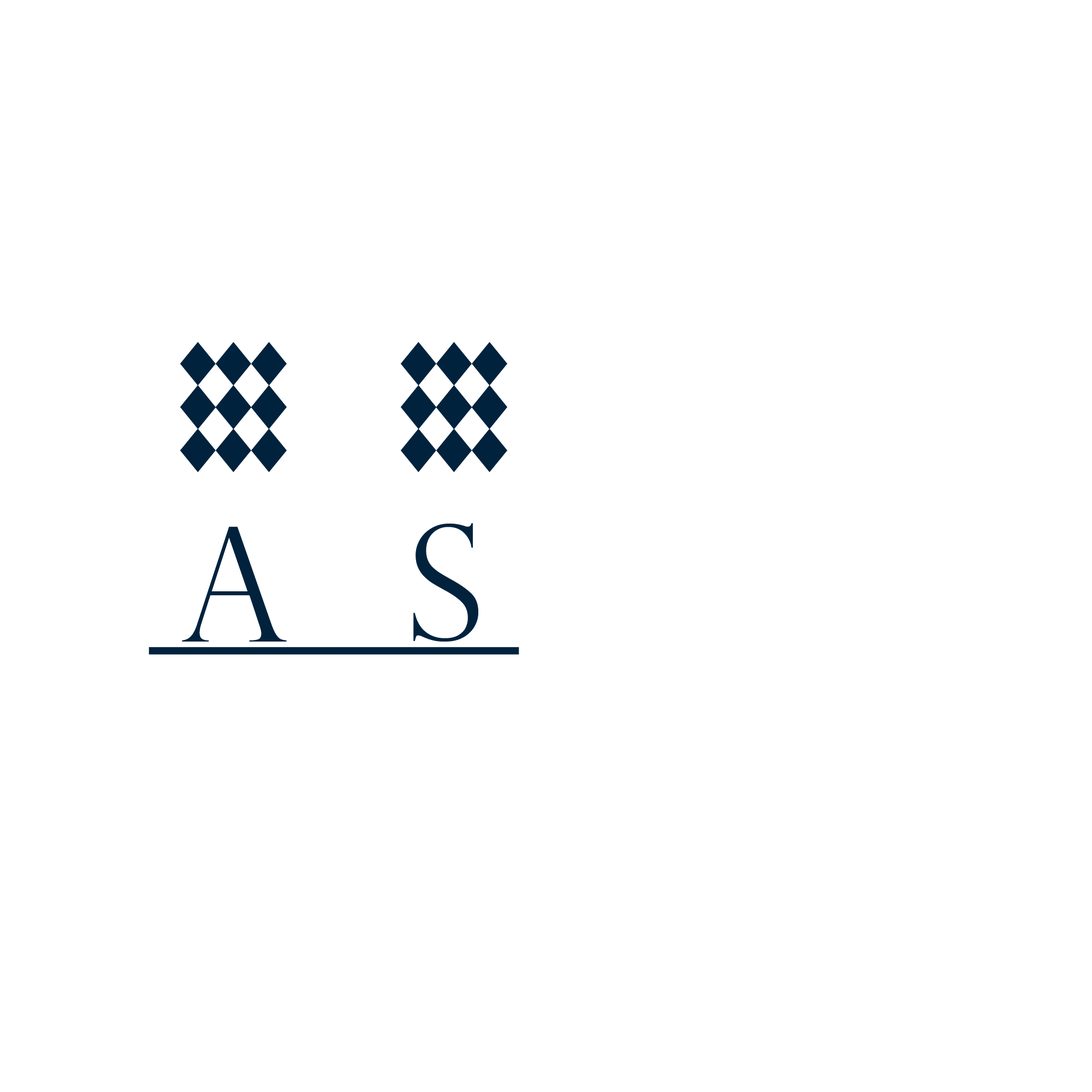
<style>
.page{position:relative;width:1092px;height:1092px;background:#ffffff}
.page>*{position:absolute;margin:0}
.t1{font:157.4px "PerpetuaTitlingMT-Light";color:#00223d}
</style>
<div class="page">
<p class="t1" style="left:182px;top:526px;width:105px;height:116px">A</p>
<p class="t1" style="left:413px;top:523px;width:65px;height:119px">S</p>
</div>
